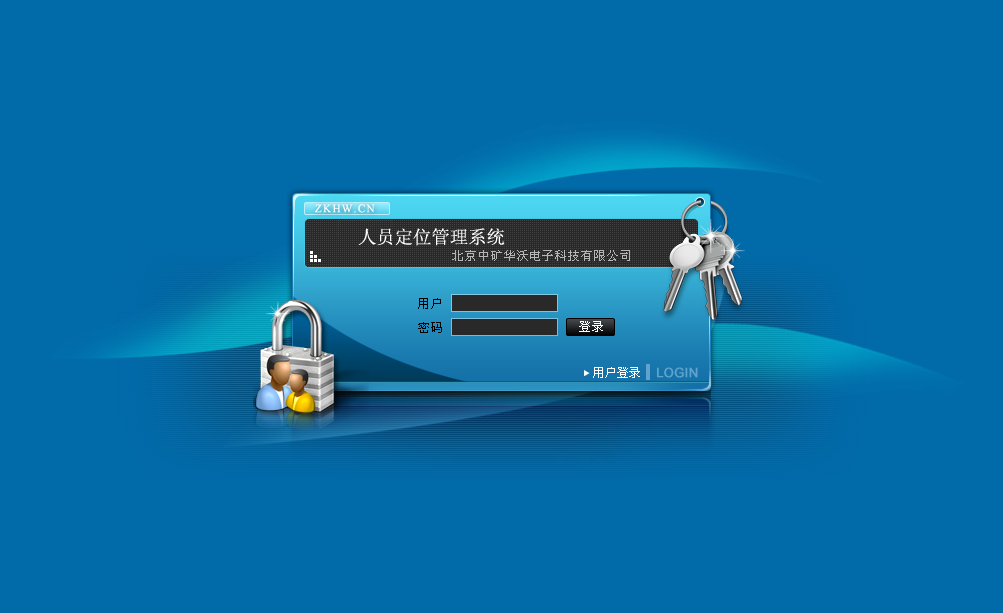
<style>
.page{position:relative;width:1003px;height:613px;background:#016aa9}
.page>*{position:absolute;margin:0}
.t1{font:11px "TimesNewRomanPSMT";letter-spacing:0.1em;color:#ffffff;font-weight:bold}
.t2{font:18.4px "SimSun";color:#ffffff}
.t3{font:12px "SimSun";letter-spacing:0.075em;color:#b4b4b4}
.t4{font:12px "SimSun";letter-spacing:0.1em;color:#000000}
.t5{font:12px "SimSun";letter-spacing:0.1em;color:#ffffff}
.t6{font:12px "SimSun";color:#ffffff}
.t7{font:13px "ArialMT";color:#60a4cd;font-weight:bold}
</style>
<div class="page">
<p class="t1" style="left:315px;top:204px;width:60px;height:9px">ZKHW.CN</p>
<p class="t2" style="left:358px;top:228px;width:147px;height:18px">人员定位管理系统</p>
<p class="t3" style="left:452px;top:250px;width:178px;height:11px">北京中矿华沃电子科技有限公司</p>
<p class="t4" style="left:418px;top:298px;width:23px;height:11px">用户</p>
<p class="t4" style="left:418px;top:322px;width:24px;height:11px">密码</p>
<p class="t5" style="left:579px;top:321px;width:24px;height:11px">登录</p>
<p class="t6" style="left:593px;top:367px;width:47px;height:11px">用户登录</p>
<p class="t7" style="left:657px;top:367px;width:41px;height:11px">LOGIN</p>
</div>
